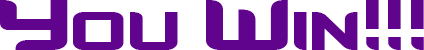
<style>
.page{position:relative;width:424px;height:50px;background:#ffffff}
.page>*{position:absolute;margin:0}
.t1{font:100px "Counter-StrikeRegular";color:#61048d}
</style>
<div class="page">
<p class="t1" style="left:0px;top:0px;width:424px;height:50px">You Win!!!</p>
</div>
